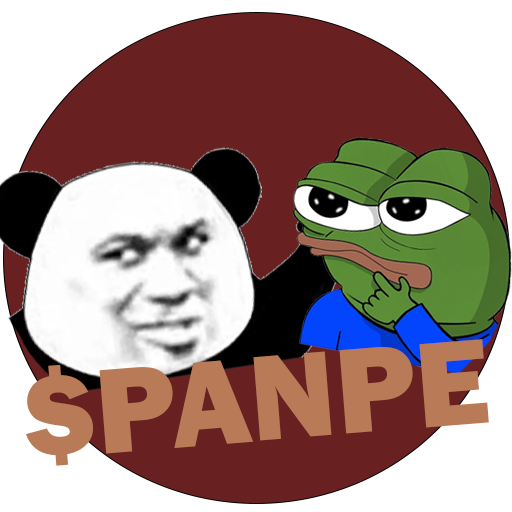
<style>
.page{position:relative;width:512px;height:512px;background:#682020}
.page>*{position:absolute;margin:0}
.t1{font:125.1px "FranklinGothic-Heavy";color:#b97a57}
</style>
<div class="page">
<p class="t1" style="left:25px;top:339px;width:464px;height:127px;rotate:-5deg">$PANPE</p>
</div>
